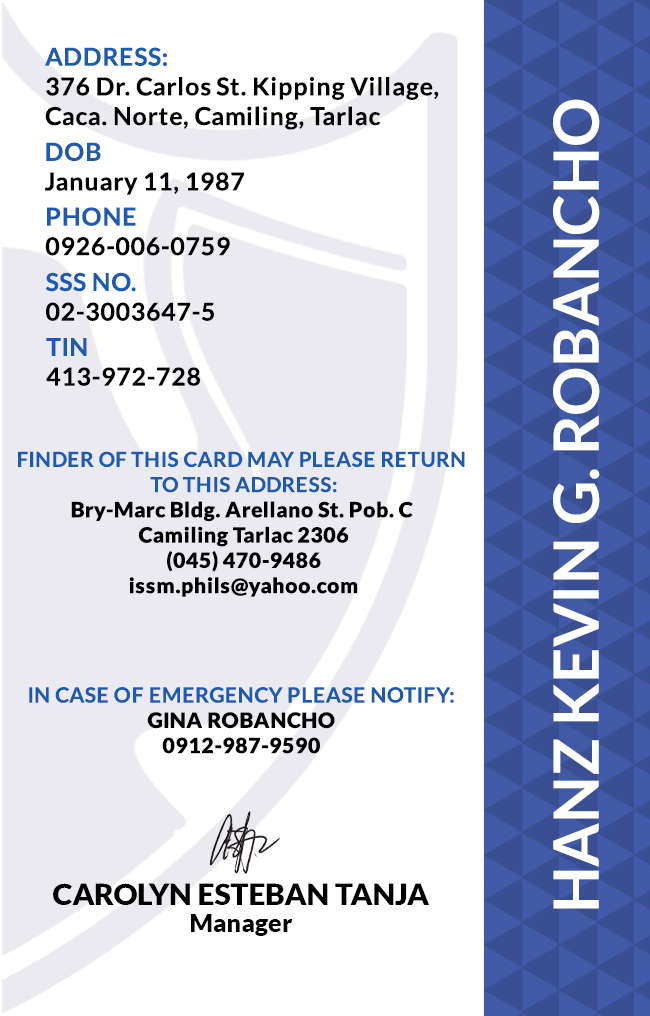
<style>
.page{position:relative;width:650px;height:1016px;background:#ffffff}
.page>*{position:absolute;margin:0}
.t1{font:24.7px/29.6px "Lato-Bold";letter-spacing:0.025em;color:#000000}
.t2{font:24.7px/29.6px "Lato-Bold";letter-spacing:0.025em;color:#1c5bb0}
.t3{font:62.5px "Lato-Bold";color:#ffffff}
.t4{font:21.1px "Lato-Black";letter-spacing:0.025em}
.t5{font:20.5px/25.3px "Lato-Bold";letter-spacing:0.025em;text-transform:uppercase}
.t6{font:21.1px/25.3px "Lato-Bold";letter-spacing:0.025em;color:#1c5bb0}
.t7{font:21.1px "Lato-Black";letter-spacing:0.025em;color:#000000}
.t8{font:29.5px "Lato-Black";color:#000000}
.t9{font:25px "Lato-Black";color:#000000}
</style>
<div class="page">
<p class="t1" style="left:45px;top:47px;width:394px;height:83px"><span class="t2">ADDRESS:<br></span>376 Dr. Carlos St. Kipping Village,<br>Caca. Norte, Camiling, Tarlac</p>
<p class="t3" style="left:553px;top:99px;width:47px;height:810px;rotate:-90deg">HANZ KEVIN G. ROBANCHO</p>
<p class="t1" style="left:45px;top:142px;width:199px;height:53px"><span class="t2">DOB<br></span>January 11, 1987</p>
<p class="t1" style="left:45px;top:207px;width:185px;height:49px"><span class="t2">PHONE <br></span>0926-006-0759</p>
<p class="t1" style="left:45px;top:272px;width:169px;height:49px"><span class="t2">SSS NO.<br></span>02-3003647-5</p>
<p class="t1" style="left:46px;top:338px;width:154px;height:48px"><span class="t2">TIN<br></span>413-972-728</p>
<p class="t4" style="left:18px;top:451px;width:447px;height:146px;text-align:center"><span class="t5">Finder of this card may please return <br>to this address:<br></span>Bry-Marc Bldg. Arellano St. Pob. C <br>Camiling Tarlac 2306<br>(045) 470-9486<br>issm.phils@yahoo.com</p>
<p class="t6" style="left:29px;top:687px;width:425px;height:67px;text-align:center">IN CASE OF EMERGENCY PLEASE NOTIFY:<br><span class="t7">GINA ROBANCHO<br>0912-987-9590</span></p>
<p class="t8" style="left:53px;top:883px;width:376px;height:22px">CAROLYN ESTEBAN TANJA</p>
<p class="t9" style="left:191px;top:914px;width:102px;height:22px">Manager</p>
</div>
